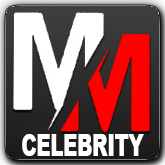
<style>
.page{position:relative;width:165px;height:165px}
.page>*{position:absolute;margin:0}
.t1{font:30px "Arial-Black";letter-spacing:-0.025em;color:#ffffff;scale:0.67 1}
</style>
<div class="page">
<p class="t1" style="left:22px;top:134px;width:122px;height:22px">CELEBRITY</p>
</div>
